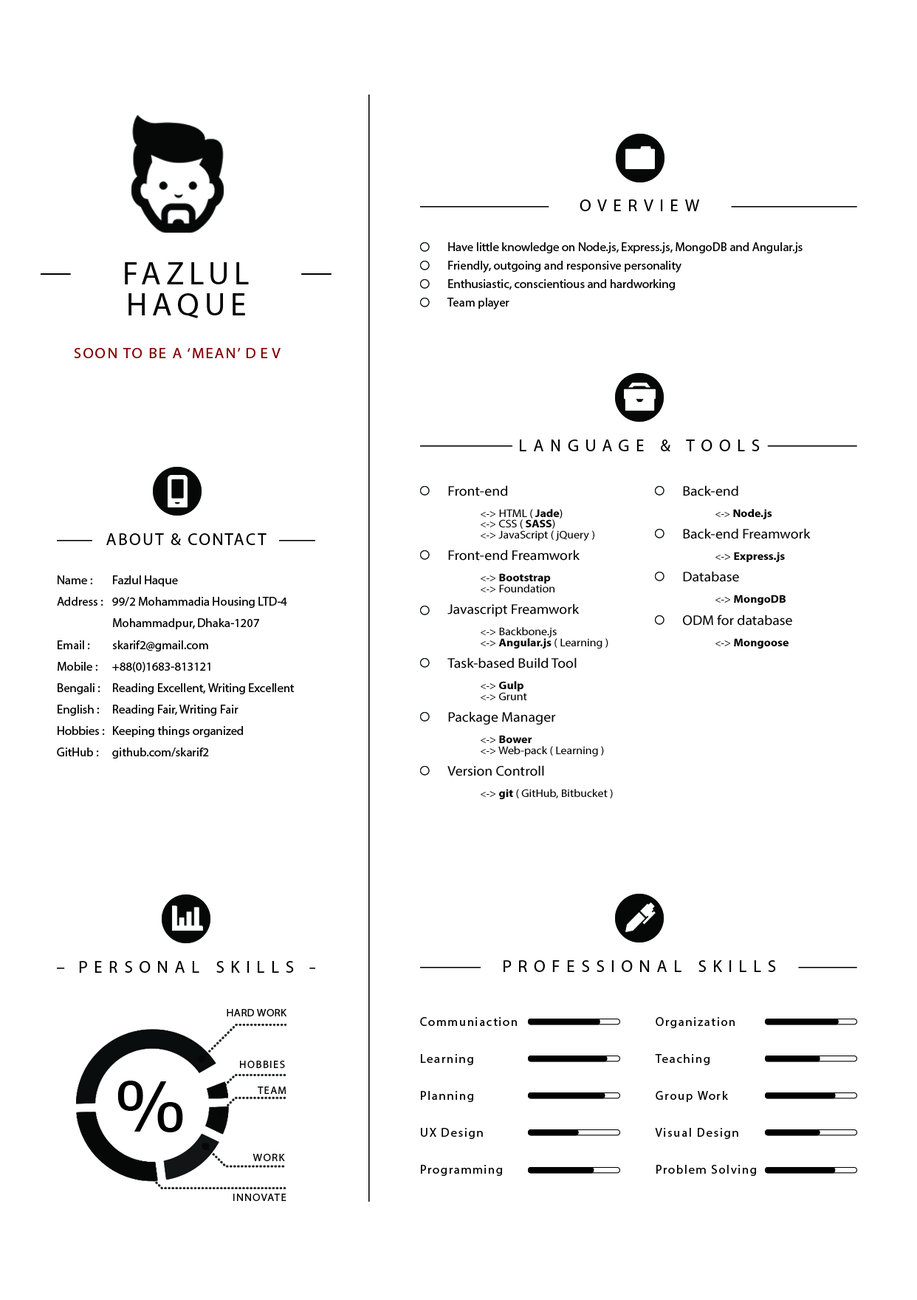
<style>
.page{position:relative;width:917px;height:1300px;background:#ffffff}
.page>*{position:absolute;margin:0}
.t1{font:16.9px "MyriadPro-Regular";letter-spacing:0.38em;color:#000000;text-transform:uppercase}
.t2{font:12.3px/9.2px "MyriadPro-Regular";color:#000000}
.t3{font:32.3px/30.8px "MyriadPro-Regular";letter-spacing:0.16em;color:#000000;text-transform:uppercase}
.t4{font:15.4px "MyriadPro-Regular";letter-spacing:0.1em;color:#810000;text-transform:uppercase}
.t5{font:15.4px "MyriadPro-Regular";letter-spacing:0.28em;color:#810000;text-transform:uppercase}
.t6{font:11.1px/10.8px "MyriadPro-Regular";color:#000000;scale:1.06 1}
.t7{font:13.8px/10.8px "MyriadPro-Regular";color:#000000;scale:1.06 1}
.t8{font:9.7px/10.8px "MyriadPro-Regular";color:#000000;scale:1.06 1}
.t9{font:11.1px/10.8px "MyriadPro-Bold";color:#000000;scale:1.06 1}
.t10{font:16.9px "MyriadPro-Regular";letter-spacing:0.1em;color:#000000;text-transform:uppercase}
.t11{font:12.3px/21.5px "MyriadPro-Regular";color:#000000}
.t12{font:10.8px/21.5px "MyriadPro-Regular";color:#000000}
.t13{font:10.8px "MyriadPro-Regular";letter-spacing:0.04em;color:#000000;text-transform:uppercase}
.t14{font:12.3px/36.9px "MyriadPro-Regular";letter-spacing:0.1em;color:#000000}
.t15{font:10.8px "MyriadPro-Regular";letter-spacing:0.1em;color:#000000;text-transform:uppercase}
.t16{font:69.4px "Verdana";letter-spacing:0.38em;color:#000000;text-transform:uppercase}
.t17{font:10.6px "MyriadPro-Regular";letter-spacing:0.1em;color:#000000;text-transform:uppercase}
</style>
<div class="page">
<p class="t1" style="left:580px;top:199px;width:119px;height:12px">Overview</p>
<p class="t2" style="left:447px;top:242px;width:356px;height:67px">Have little knowledge on Node.js, Express.js, MongoDB and Angular.js<br><br>Friendly, outgoing and responsive personality<br><br>Enthusiastic, conscientious and hardworking<br>  <br>Team player</p>
<p class="t3" style="left:125px;top:262px;width:124px;height:56px;text-align:center">FAZLUL HAQUE</p>
<p class="t4" style="left:74px;top:348px;width:207px;height:10px">SOON to be a ‘mean’ <span class="t5">dev</span></p>
<p class="t1" style="left:520px;top:439px;width:240px;height:12px">Language &amp; Tools</p>
<p class="t6" style="left:448px;top:485px;width:165px;height:314px"><span class="t7">Front-end<br></span><span class="t8"> <br>               &lt;-</span>&gt; HTML (<span class="t9"> Jade</span>)<br><span class="t8">               &lt;-</span>&gt; CSS ( <span class="t9">SASS</span>)<br><span class="t8">               &lt;-</span>&gt; JavaScript ( jQuery )<br><br><span class="t7">Front-end Freamwork<br><br></span><span class="t8">               &lt;-</span>&gt; <span class="t9">Bootstrap<br></span><span class="t8">               &lt;-</span>&gt; Foundation<br><br><span class="t7">Javascript Freamwork<br><br></span><span class="t8">               &lt;-</span>&gt; Backbone.js<br><span class="t8">               &lt;-</span>&gt; <span class="t9">Angular.js</span> ( Learning )<br><br><span class="t7">Task-based Build Tool<br><br></span><span class="t8">               &lt;-</span>&gt; <span class="t9">Gulp<br></span><span class="t8">               &lt;-</span>&gt; Grunt<br><br><span class="t7">Package Manager<br><br></span><span class="t8">               &lt;-</span>&gt; <span class="t9">Bower<br></span><span class="t8">               &lt;-</span>&gt; Web-pack ( Learning )<br><br><span class="t7">Version Controll<br><br></span><span class="t8">               &lt;-</span>&gt; <span class="t9">git</span> ( GitHub, Bitbucket )</p>
<p class="t7" style="left:683px;top:485px;width:128px;height:163px">Back-end <br><br><span class="t8">               &lt;-&gt; </span><span class="t9">Node.js <br><br></span>Back-end Freamwork<br><br><span class="t8">               &lt;-</span><span class="t6">&gt; </span><span class="t9">Express.js<br><br></span>Database<br><br><span class="t8">               &lt;-</span><span class="t6">&gt; </span><span class="t9">MongoDB<br><br></span>ODM for database<br><br><span class="t8">               &lt;-</span><span class="t6">&gt; </span><span class="t9">Mongoose</span></p>
<p class="t10" style="left:106px;top:533px;width:161px;height:12px">About &amp; contact</p>
<p class="t11" style="left:57px;top:575px;width:238px;height:184px">Name :  Fazlul Haque<br>Address :  99/2 Mohammadia Housing LTD-4<br> Mohammadpur, Dhaka-1207<br>Email : skarif2@gmail.com<br>Mobile :  +88(0)1683-813121<br>Bengali :  Reading Excellent, Writing Excellent<br>English :  Reading Fair, Writing Fair<br>Hobbies : Keeping things organized<br>GitHub : github.com/skarif2<br><span class="t12"></span></p>
<p class="t1" style="left:79px;top:961px;width:215px;height:12px">Personal skills</p>
<p class="t1" style="left:504px;top:960px;width:272px;height:12px">Professional skills</p>
<p class="t13" style="left:227px;top:1009px;width:60px;height:7px">Hard work</p>
<p class="t14" style="left:420px;top:1017px;width:97px;height:159px">Communiaction<br>Learning<br>Planning <br>UX Design<br>Programming</p>
<p class="t14" style="left:655px;top:1017px;width:101px;height:159px">Organization<br>Teaching<br>Group Work<br>Visual Design<br>Problem Solving</p>
<p class="t15" style="left:240px;top:1061px;width:45px;height:7px">Hobbies</p>
<p class="t16" style="left:117px;top:1081px;width:66px;height:51px">%</p>
<p class="t17" style="left:258px;top:1086px;width:29px;height:8px">Team</p>
<p class="t15" style="left:253px;top:1154px;width:32px;height:7px">Work</p>
<p class="t15" style="left:233px;top:1194px;width:54px;height:7px">Innovate</p>
</div>
